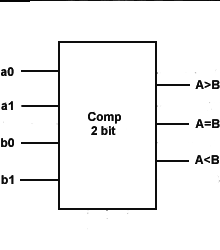
<style>
.page{position:relative;width:220px;height:250px;background:#ffffff}
.page>*{position:absolute;margin:0}
.t1{font:12px "Arial-BoldMT"}
.t2{font:12px "Arial-BoldMT";color:#0d0d0d}
</style>
<div class="page">
<p class="t1" style="left:1px;top:66px;width:13px;height:9px">a0</p>
<p class="t1" style="left:195px;top:79px;width:25px;height:9px">A&gt;B</p>
<p class="t2" style="left:1px;top:100px;width:12px;height:9px">a1</p>
<p class="t2" style="left:88px;top:111px;width:33px;height:23px">Comp<br> 2 bit</p>
<p class="t1" style="left:195px;top:118px;width:25px;height:9px">A=B</p>
<p class="t2" style="left:1px;top:137px;width:13px;height:9px">b0</p>
<p class="t2" style="left:1px;top:174px;width:13px;height:9px">b1</p>
</div>
